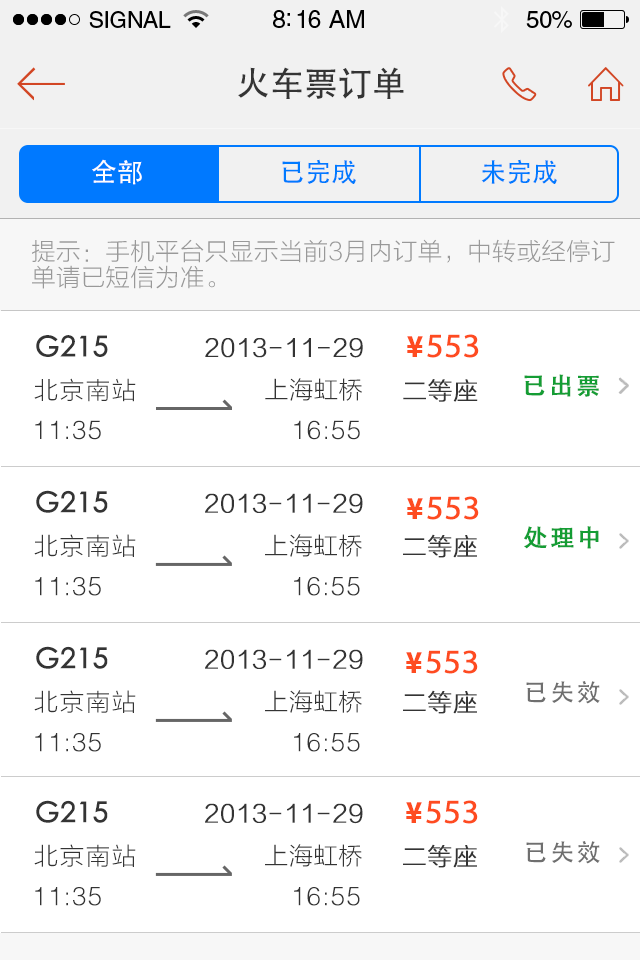
<style>
.page{position:relative;width:640px;height:960px;background:#ffffff}
.page>*{position:absolute;margin:0}
.t1{font:34px "STHeitiSC-Medium";color:#343434}
.t2{font:26px "AdobeHeitiStd-Regular";color:#ffffff}
.t3{font:26px "AdobeHeitiStd-Regular";color:#007aff}
.t4{font:24px/26px "STHeitiSC-Light";color:#999999}
.t5{font:28px "STHeitiSC-Medium";color:#343434;font-weight:bold}
.t6{font:24px "STHeitiSC-Light";color:#343434;font-weight:bold}
.t7{font:30px "FZZYJW--GB1-0";color:#fe4b20}
.t8{font:34px "MyriadPro-Regular";color:#fe4b20;font-weight:bold}
.t9{font:24px "STHeitiSC-Medium";letter-spacing:0.1em;color:#149d34;font-weight:bold}
.t10{font:24px "STHeitiSC-Light";letter-spacing:0.05em;color:#343434}
.t11{font:24px "STHeitiSC-Light";color:#343434}
.t12{font:26px "Helvetica-Light";letter-spacing:0.05em;color:#343434}
.t13{font:28.1px "STHeitiSC-Medium";color:#343434;font-weight:bold}
.t14{font:24.1px "STHeitiSC-Light";color:#343434;font-weight:bold}
.t15{font:24.1px "STHeitiSC-Light";letter-spacing:0.05em;color:#343434}
.t16{font:24.1px "STHeitiSC-Light";color:#343434}
.t17{font:26.1px "Helvetica-Light";letter-spacing:0.05em;color:#343434}
.t18{font:24px "STHeitiSC-Medium";letter-spacing:0.1em;color:#6f6f6f}
</style>
<div class="page">
<p class="t1" style="left:238px;top:67px;width:166px;height:32px">火车票订单</p>
<p class="t2" style="left:92px;top:159px;width:50px;height:26px">全部</p>
<p class="t3" style="left:282px;top:159px;width:74px;height:25px">已完成</p>
<p class="t3" style="left:481px;top:159px;width:76px;height:25px">未完成</p>
<p class="t4" style="left:32px;top:239px;width:583px;height:50px">提示：手机平台只显示当前3月内订单，中转或经停订单请已短信为准。</p>
<p class="t5" style="left:36px;top:335px;width:72px;height:22px">G215</p>
<p class="t6" style="left:205px;top:338px;width:158px;height:20px">2013-11-29</p>
<p class="t7" style="left:407px;top:336px;width:16px;height:21px">￥</p>
<p class="t8" style="left:427px;top:334px;width:52px;height:24px">553</p>
<p class="t9" style="left:524px;top:374px;width:75px;height:23px">已出票</p>
<p class="t10" style="left:34px;top:378px;width:102px;height:24px">北京南站</p>
<p class="t11" style="left:265px;top:378px;width:97px;height:23px">上海虹桥</p>
<p class="t6" style="left:403px;top:379px;width:75px;height:23px">二等座</p>
<p class="t12" style="left:35px;top:420px;width:66px;height:20px">11:35</p>
<p class="t12" style="left:294px;top:420px;width:66px;height:20px">16:55</p>
<p class="t13" style="left:36px;top:490px;width:72px;height:23px">G215</p>
<p class="t14" style="left:205px;top:493px;width:158px;height:21px">2013-11-29</p>
<p class="t8" style="left:427px;top:496px;width:52px;height:24px">553</p>
<p class="t7" style="left:407px;top:498px;width:16px;height:21px">￥</p>
<p class="t15" style="left:34px;top:534px;width:102px;height:23px">北京南站</p>
<p class="t16" style="left:265px;top:534px;width:97px;height:23px">上海虹桥</p>
<p class="t14" style="left:403px;top:534px;width:74px;height:24px">二等座</p>
<p class="t9" style="left:524px;top:526px;width:75px;height:23px">处理中</p>
<p class="t17" style="left:35px;top:577px;width:66px;height:19px">11:35</p>
<p class="t17" style="left:294px;top:577px;width:66px;height:19px">16:55</p>
<p class="t13" style="left:36px;top:646px;width:72px;height:23px">G215</p>
<p class="t14" style="left:205px;top:649px;width:158px;height:21px">2013-11-29</p>
<p class="t7" style="left:406px;top:652px;width:16px;height:21px">￥</p>
<p class="t8" style="left:426px;top:650px;width:52px;height:24px">553</p>
<p class="t18" style="left:526px;top:681px;width:74px;height:23px">已失效</p>
<p class="t15" style="left:34px;top:690px;width:102px;height:23px">北京南站</p>
<p class="t16" style="left:265px;top:690px;width:97px;height:23px">上海虹桥</p>
<p class="t14" style="left:403px;top:690px;width:74px;height:24px">二等座</p>
<p class="t17" style="left:35px;top:733px;width:66px;height:19px">11:35</p>
<p class="t17" style="left:294px;top:733px;width:66px;height:19px">16:55</p>
<p class="t13" style="left:36px;top:800px;width:72px;height:23px">G215</p>
<p class="t14" style="left:205px;top:803px;width:158px;height:21px">2013-11-29</p>
<p class="t7" style="left:406px;top:802px;width:16px;height:21px">￥</p>
<p class="t8" style="left:426px;top:800px;width:52px;height:24px">553</p>
<p class="t15" style="left:34px;top:844px;width:102px;height:23px">北京南站</p>
<p class="t16" style="left:265px;top:844px;width:97px;height:23px">上海虹桥</p>
<p class="t14" style="left:403px;top:844px;width:74px;height:24px">二等座</p>
<p class="t18" style="left:526px;top:841px;width:74px;height:23px">已失效</p>
<p class="t17" style="left:35px;top:887px;width:66px;height:19px">11:35</p>
<p class="t17" style="left:294px;top:887px;width:66px;height:19px">16:55</p>
</div>
